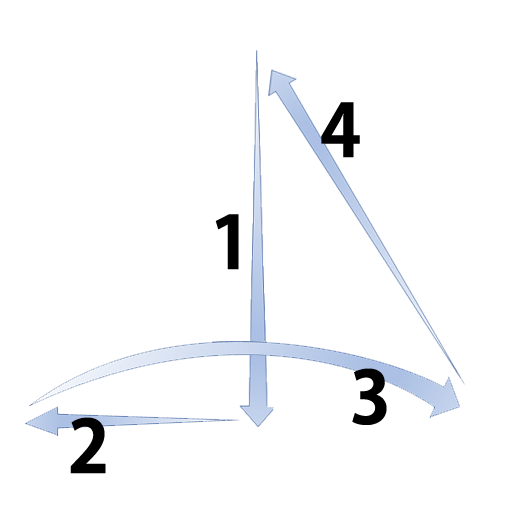
<style>
.page{position:relative;width:512px;height:512px;background:#ffffff}
.page>*{position:absolute;margin:0}
.t1{font:72px "KozGoPr6N-Bold";color:#000000;font-weight:bold}
</style>
<div class="page">
<p class="t1" style="left:321px;top:102px;width:39px;height:56px">4</p>
<p class="t1" style="left:215px;top:214px;width:24px;height:56px">1</p>
<p class="t1" style="left:352px;top:368px;width:35px;height:57px">3</p>
<p class="t1" style="left:70px;top:417px;width:36px;height:57px">2</p>
</div>
